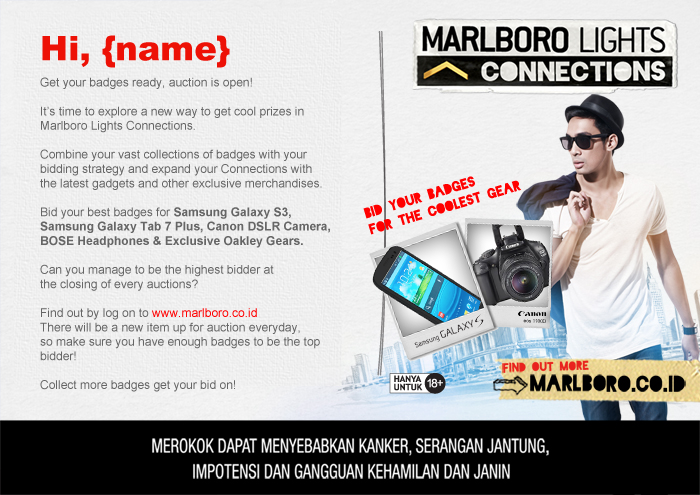
<style>
.page{position:relative;width:700px;height:495px}
.page>*{position:absolute;margin:0}
.t1{font:33.8px "Arial-Black";color:#ed1106}
.t2{font:12px "ArialMT";color:#666666}
.t3{font:12px "Arial-BoldMT";color:#666666}
.t4{font:12px "ArialMT";color:#ff0000}
</style>
<div class="page">
<p class="t1" style="left:42px;top:35px;width:188px;height:33px">Hi, {name}</p>
<p class="t2" style="left:40px;top:77px;width:290px;height:315px">Get your badges ready, auction is open!<br> <br>It’s time to explore a new way to get cool prizes in Marlboro Lights Connections.<br><br>Combine your vast collections of badges with your bidding strategy and expand your Connections with<br>the latest gadgets and other exclusive merchandises.   <br><br>Bid your best badges for <span class="t3">Samsung Galaxy S3, Samsung Galaxy Tab 7 Plus, Canon DSLR Camera,<br>BOSE Headphones &amp; Exclusive Oakley Gears.</span> <br><br>Can you manage to be the highest bidder at<br>the closing of every auctions?<br><br>Find out by log on to <span class="t4">www.marlboro.co.id<br></span>There will be a new item up for auction everyday,<br>so make sure you have enough badges to be the top bidder!<br> <br>Collect more badges get your bid on!</p>
</div>
